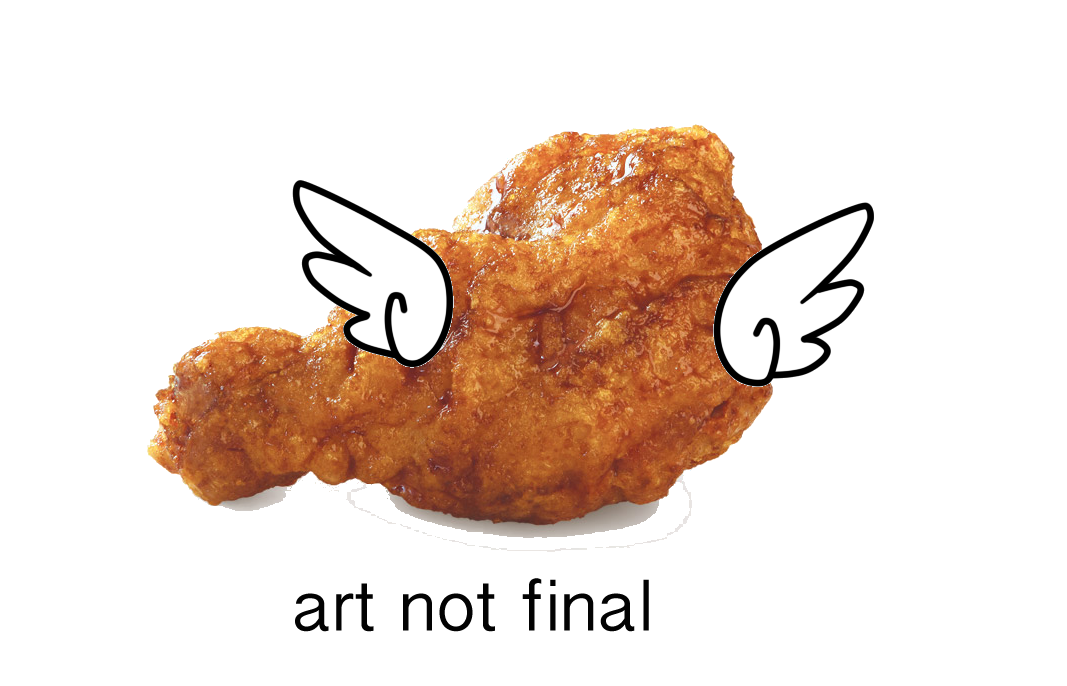
<style>
.page{position:relative;width:1067px;height:686px;background:#ffffff}
.page>*{position:absolute;margin:0}
.t1{font:73px "MalayalamSangamMN";color:#020202}
</style>
<div class="page">
<p class="t1" style="left:295px;top:578px;width:354px;height:54px">art not final</p>
</div>
